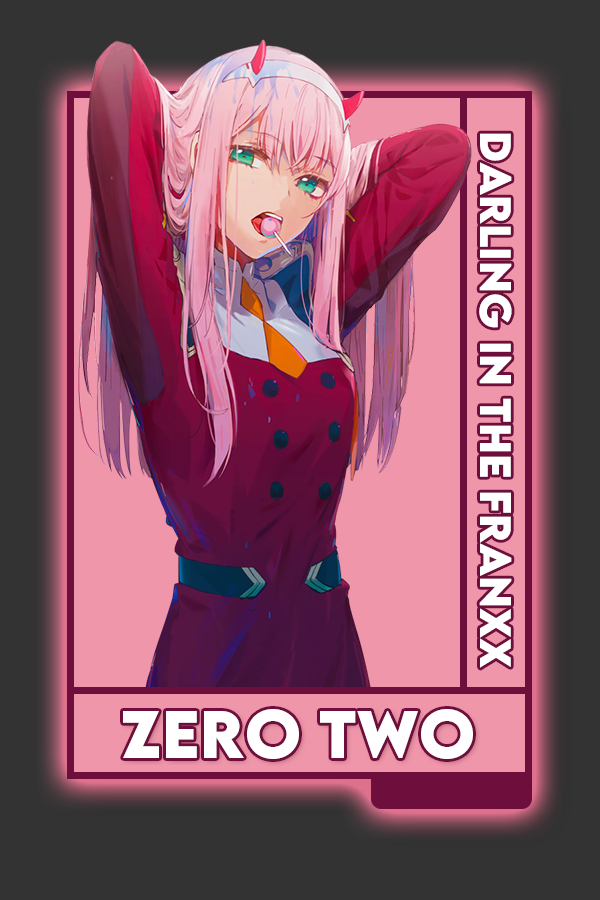
<style>
.page{position:relative;width:600px;height:900px;background:#333333}
.page>*{position:absolute;margin:0}
.t1{font:39.2px "LEMONMILK-Bold";color:#ffffff}
.t2{font:60.3px "LEMONMILK-Bold";color:#ffffff}
</style>
<div class="page">
<p class="t1" style="left:479px;top:133px;width:33px;height:535px;rotate:90deg">Darling in the Franxx</p>
<p class="t2" style="left:123px;top:709px;width:350px;height:50px">Zero Two</p>
</div>
